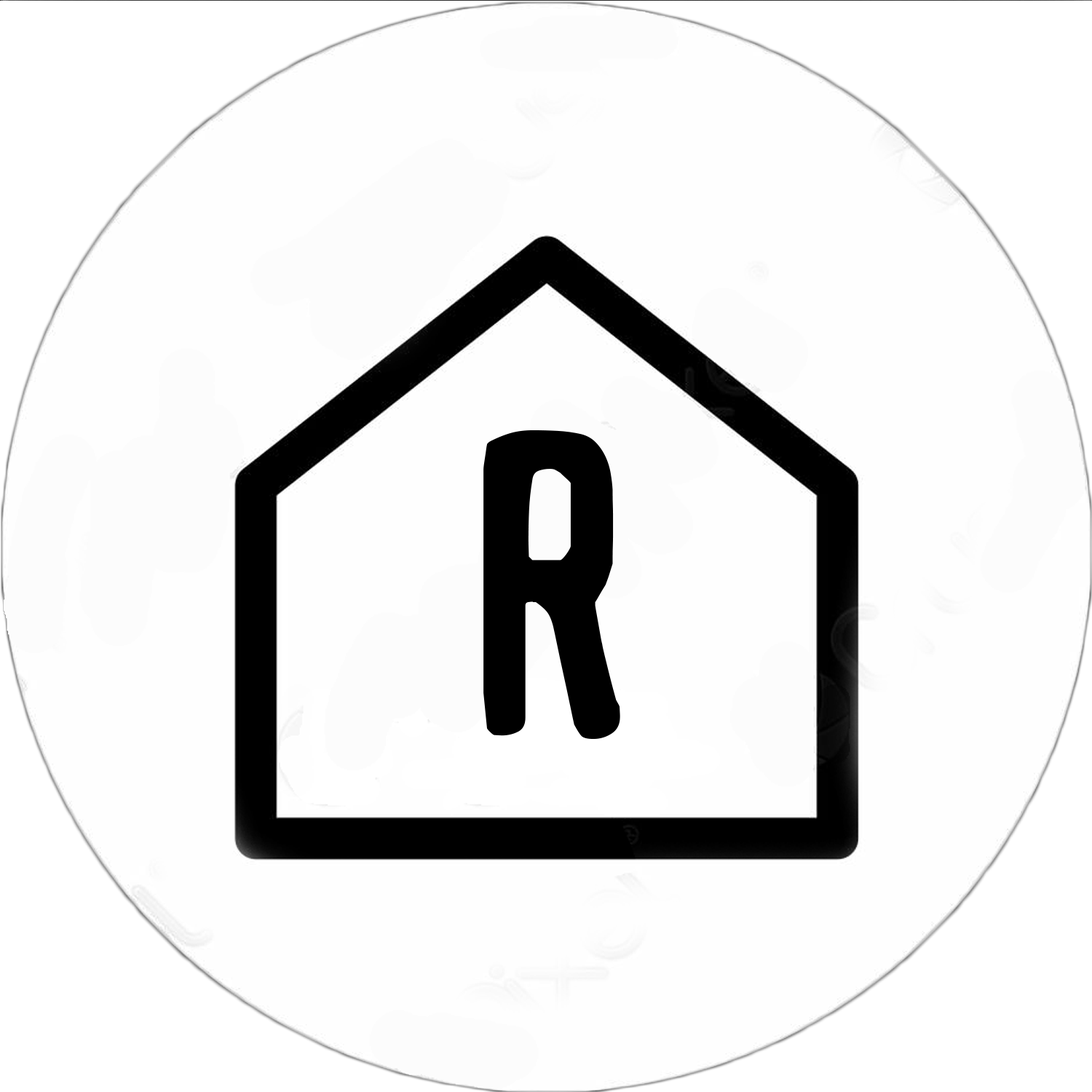
<style>
.page{position:relative;width:1092px;height:1092px;background:#fefefe}
.page>*{position:absolute;margin:0}
.t1{font:436.7px "MythBusters";color:#000000}
</style>
<div class="page">
<p class="t1" style="left:483px;top:430px;width:137px;height:308px">r</p>
</div>
